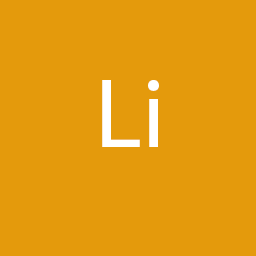
<style>
.page{position:relative;width:256px;height:256px;background:#e49a0c}
.page>*{position:absolute;margin:0}
.t1{font:100px "MyriadPro-Regular";color:#ffffff}
</style>
<div class="page">
<p class="t1" style="left:102px;top:80px;width:57px;height:67px">Li</p>
</div>
